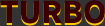
<style>
.page{position:relative;width:105px;height:26px;background:#3d0000}
.page>*{position:absolute;margin:0}
.t1{font:30px "NotoSansCJKsc-Black";color:#3d0000}
</style>
<div class="page">
<p class="t1" style="left:0px;top:0px;width:105px;height:24px">TURBO</p>
</div>
